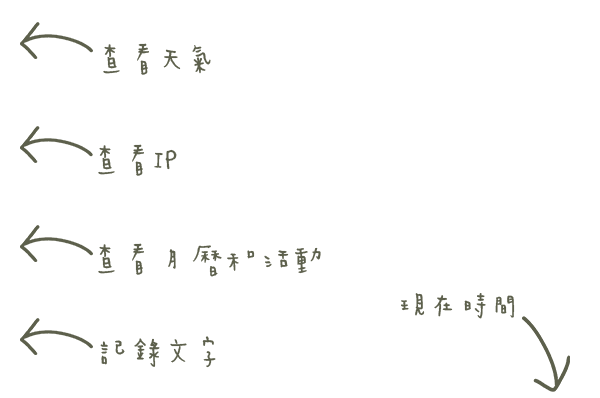
<style>
.page{position:relative;width:600px;height:398px;background:#ffffff}
.page>*{position:absolute;margin:0}
.t1{font:45.8px "naughty-Regular";color:#5d604c}
</style>
<div class="page">
<p class="t1" style="left:103px;top:43px;width:108px;height:32px">查看天氣</p>
<p class="t1" style="left:98px;top:144px;width:79px;height:32px">查看IP</p>
<p class="t1" style="left:98px;top:243px;width:223px;height:34px">查看月曆和活動</p>
<p class="t1" style="left:401px;top:293px;width:114px;height:26px">現在時間</p>
<p class="t1" style="left:100px;top:336px;width:116px;height:32px">記錄文字</p>
</div>
